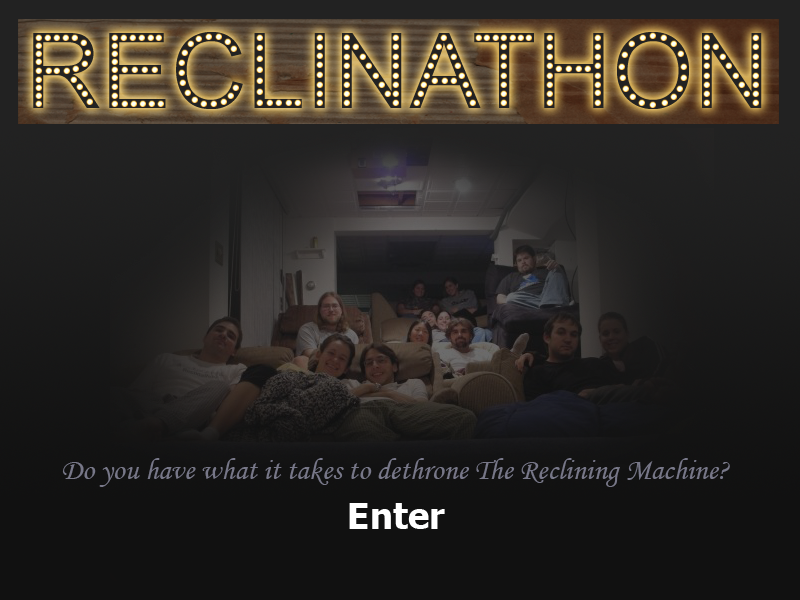
<style>
.page{position:relative;width:800px;height:600px}
.page>*{position:absolute;margin:0}
.t1{font:30px "MonotypeCorsiva";color:#777788}
.t2{font:36px "Tahoma-Bold";color:#ffffff}
</style>
<div class="page">
<p class="t1" style="left:62px;top:458px;width:668px;height:29px">Do you have what it takes to dethrone The Reclining Machine?</p>
<p class="t2" style="left:349px;top:503px;width:96px;height:26px">Enter</p>
</div>
